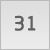
<style>
.page{position:relative;width:50px;height:50px}
.page>*{position:absolute;margin:0}
.t1{font:20px "RTWSYueGoTrial-Regular";color:#606060;font-weight:bold}
</style>
<div class="page">
<p class="t1" style="left:14px;top:15px;width:22px;height:16px">31</p>
</div>
